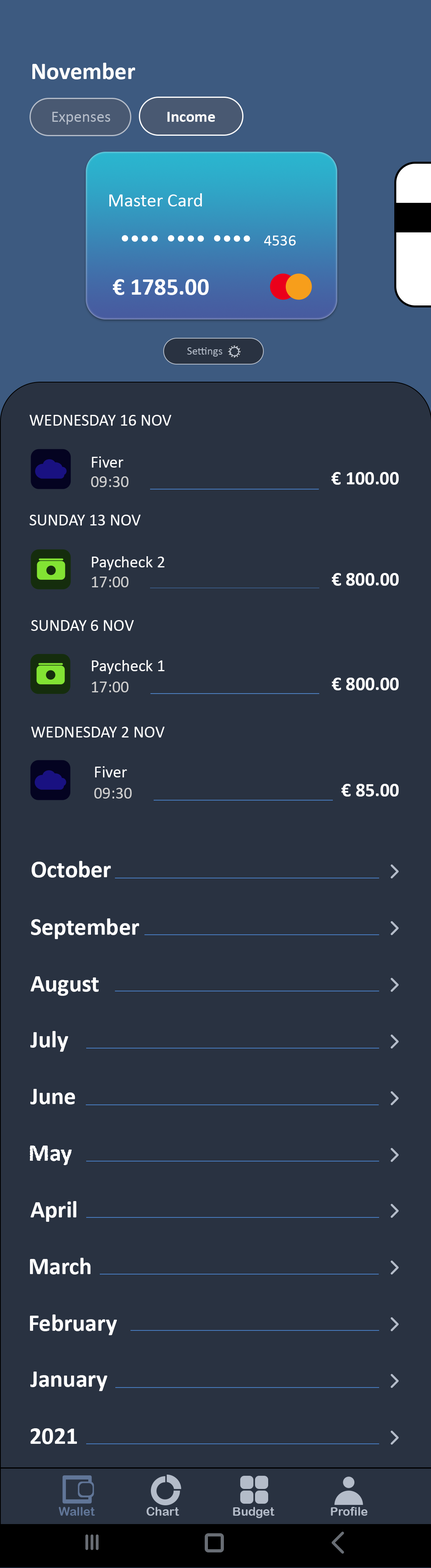
<style>
.page{position:relative;width:431px;height:1568px;background:#293241}
.page>*{position:absolute;margin:0}
.t1{font:24px "Calibri-Bold";color:#ffffff}
.t2{font:16px "Calibri";color:#b4bcc9}
.t3{font:16px "Calibri-Bold";color:#ffffff}
.t4{font:19.2px "Calibri";color:#ffffff}
.t5{font:16px "Calibri";color:#ffffff}
.t6{font:11.2px "Calibri";color:#b4bcc9}
.t7{font:16.8px "Calibri";color:#ffffff}
.t8{font:19.2px "Calibri-Bold";color:#ffffff}
.t9{font:16.8px "Calibri";color:#cfcfcf}
.t10{font:12px "ArialRoundedMTBold";color:#617698}
.t11{font:12px "ArialRoundedMTBold";color:#b4bcc9}
</style>
<div class="page">
<p class="t1" style="left:32px;top:63px;width:103px;height:16px">November</p>
<p class="t2" style="left:52px;top:112px;width:58px;height:13px">Expenses</p>
<p class="t3" style="left:167px;top:112px;width:48px;height:10px">Income</p>
<p class="t4" style="left:109px;top:193px;width:93px;height:13px">Master Card</p>
<p class="t5" style="left:264px;top:236px;width:32px;height:10px">4536</p>
<p class="t1" style="left:113px;top:279px;width:96px;height:16px">€ 1785.00</p>
<p class="t6" style="left:187px;top:347px;width:35px;height:10px">Settings</p>
<p class="t7" style="left:30px;top:415px;width:142px;height:11px">WEDNESDAY 16 NOV</p>
<p class="t7" style="left:92px;top:456px;width:31px;height:12px">Fiver</p>
<p class="t8" style="left:331px;top:472px;width:68px;height:13px">€ 100.00</p>
<p class="t9" style="left:91px;top:476px;width:38px;height:11px">09:30</p>
<p class="t7" style="left:30px;top:515px;width:111px;height:10px">SUNDAY 13 NOV</p>
<p class="t7" style="left:92px;top:556px;width:73px;height:14px">Paycheck 2</p>
<p class="t9" style="left:92px;top:577px;width:37px;height:10px">17:00</p>
<p class="t8" style="left:332px;top:573px;width:67px;height:13px">€ 800.00</p>
<p class="t7" style="left:31px;top:620px;width:103px;height:11px">SUNDAY 6 NOV</p>
<p class="t7" style="left:92px;top:660px;width:73px;height:14px">Paycheck 1</p>
<p class="t8" style="left:332px;top:678px;width:67px;height:12px">€ 800.00</p>
<p class="t9" style="left:92px;top:682px;width:37px;height:10px">17:00</p>
<p class="t7" style="left:31px;top:727px;width:134px;height:10px">WEDNESDAY 2 NOV</p>
<p class="t7" style="left:95px;top:766px;width:32px;height:11px">Fiver</p>
<p class="t8" style="left:341px;top:784px;width:58px;height:13px">€ 85.00</p>
<p class="t9" style="left:94px;top:788px;width:38px;height:11px">09:30</p>
<p class="t1" style="left:32px;top:861px;width:79px;height:17px">October</p>
<p class="t1" style="left:31px;top:918px;width:108px;height:21px">September</p>
<p class="t1" style="left:30px;top:976px;width:69px;height:20px">August</p>
<p class="t1" style="left:30px;top:1031px;width:38px;height:21px">July</p>
<p class="t1" style="left:30px;top:1089px;width:45px;height:15px">June</p>
<p class="t1" style="left:30px;top:1146px;width:42px;height:19px">May</p>
<p class="t1" style="left:30px;top:1201px;width:47px;height:21px">April</p>
<p class="t1" style="left:30px;top:1258px;width:61px;height:17px">March</p>
<p class="t1" style="left:30px;top:1314px;width:87px;height:21px">February</p>
<p class="t1" style="left:30px;top:1372px;width:77px;height:19px">January</p>
<p class="t1" style="left:30px;top:1428px;width:47px;height:16px">2021</p>
<p class="t10" style="left:59px;top:1507px;width:36px;height:9px">Wallet</p>
<p class="t11" style="left:147px;top:1507px;width:32px;height:9px">Chart</p>
<p class="t11" style="left:233px;top:1507px;width:42px;height:11px">Budget</p>
<p class="t11" style="left:331px;top:1507px;width:37px;height:9px">Profile</p>
</div>
